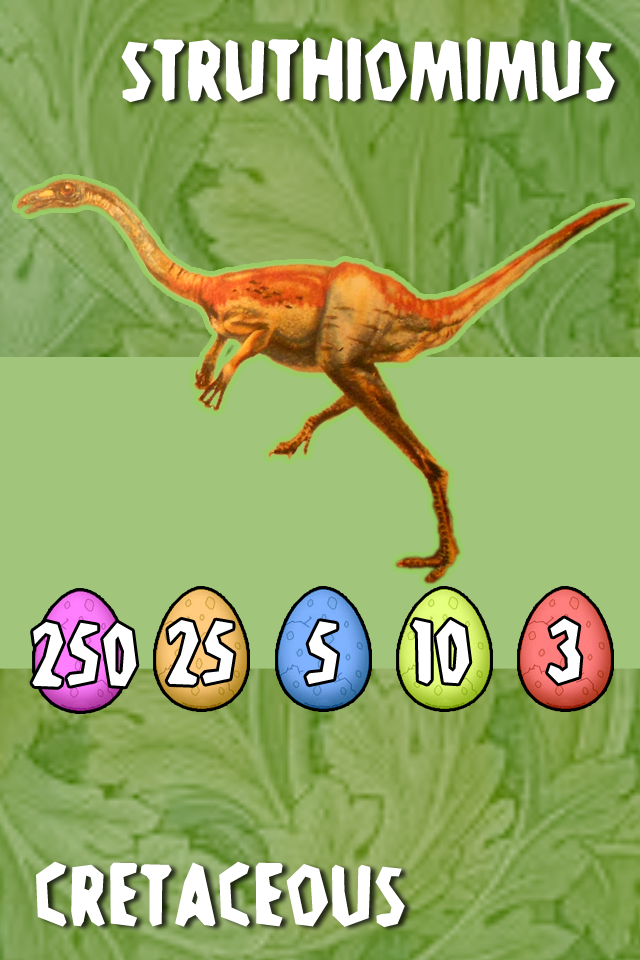
<style>
.page{position:relative;width:640px;height:960px;background:#a0c57b}
.page>*{position:absolute;margin:0}
.t1{font:96px "Stone-Age";color:#ffffff}
</style>
<div class="page">
<p class="t1" style="left:121px;top:37px;width:494px;height:66px">Struthiomimus</p>
<p class="t1" style="left:32px;top:622px;width:105px;height:65px">250</p>
<p class="t1" style="left:167px;top:620px;width:67px;height:65px">25</p>
<p class="t1" style="left:306px;top:621px;width:32px;height:64px">5</p>
<p class="t1" style="left:412px;top:619px;width:58px;height:65px">10</p>
<p class="t1" style="left:548px;top:618px;width:33px;height:66px">3</p>
<p class="t1" style="left:36px;top:861px;width:369px;height:67px">Cretaceous</p>
</div>
